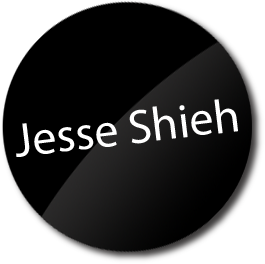
<style>
.page{position:relative;width:265px;height:264px;background:#000000}
.page>*{position:absolute;margin:0}
.t1{font:48px "MyriadPro-Regular";color:#ffffff}
</style>
<div class="page">
<p class="t1" style="left:16px;top:99px;width:222px;height:58px;rotate:-7deg">Jesse Shieh</p>
</div>
